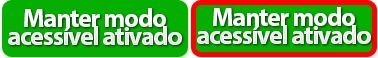
<style>
.page{position:relative;width:378px;height:58px;background:#04af00}
.page>*{position:absolute;margin:0}
.t1{font:26px/17.7px "MyriadPro-Bold";letter-spacing:-0.05em;color:#fcfcfc}
</style>
<div class="page">
<p class="t1" style="left:8px;top:8px;width:174px;height:37px;text-align:center">Manter modo<br>acessível ativado</p>
<p class="t1" style="left:197px;top:7px;width:174px;height:37px;text-align:center">Manter modo<br>acessível ativado</p>
</div>
